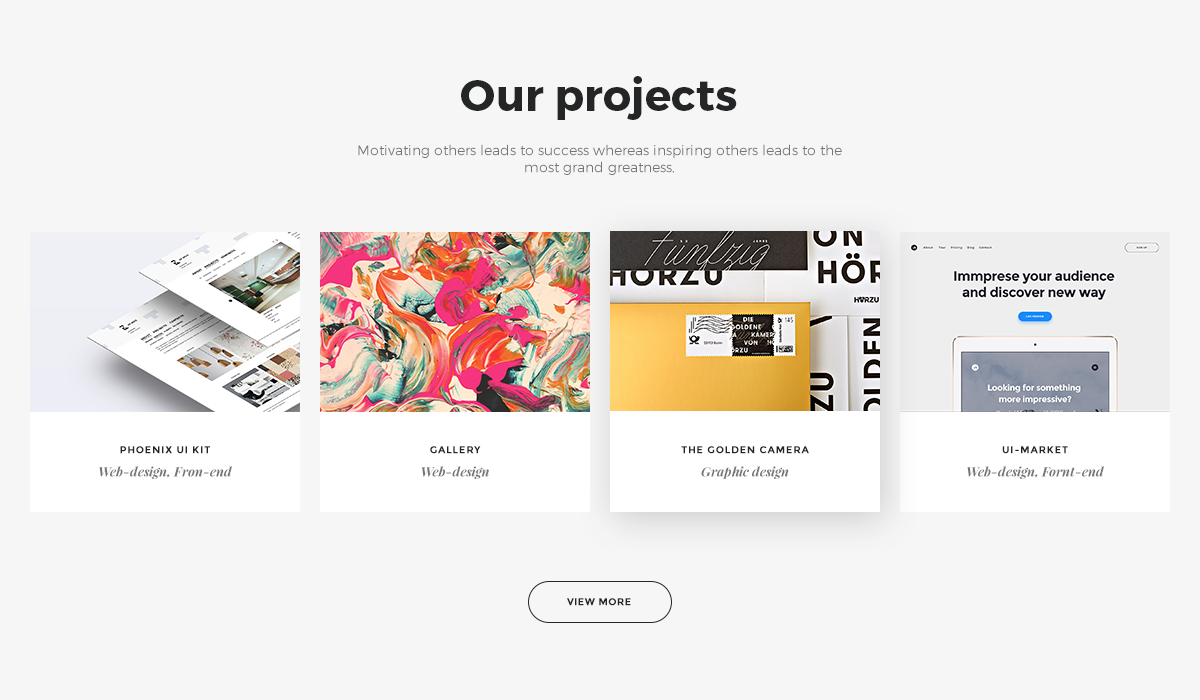
<style>
.page{position:relative;width:1200px;height:700px;background:#f6f6f6}
.page>*{position:absolute;margin:0}
.t1{font:44px "Montserrat-Bold";color:#242526}
.t2{font:14px "Montserrat-Light";color:#747474}
.t3{font:10px "Montserrat-Bold";letter-spacing:0.08em;color:#242526;text-transform:uppercase}
.t4{font:13px "PlayfairDisplay-BoldItalic";color:#747474}
.t5{font:10px "Montserrat-Bold";letter-spacing:0.04em;color:#242526;text-transform:uppercase}
</style>
<div class="page">
<p class="t1" style="left:461px;top:76px;width:276px;height:44px">Our projects</p>
<p class="t2" style="left:358px;top:144px;width:484px;height:31px;text-align:center">Motivating others leads to success whereas inspiring others leads to the most grand greatness.</p>
<p class="t3" style="left:120px;top:446px;width:90px;height:8px">Phoenix ui kit</p>
<p class="t3" style="left:430px;top:446px;width:51px;height:8px">Gallery</p>
<p class="t3" style="left:681px;top:446px;width:128px;height:8px">The Golden camera</p>
<p class="t3" style="left:1002px;top:446px;width:66px;height:8px">UI-market</p>
<p class="t4" style="left:99px;top:466px;width:133px;height:13px">Web-design, Fron-end</p>
<p class="t4" style="left:421px;top:466px;width:68px;height:13px">Web-design</p>
<p class="t4" style="left:701px;top:466px;width:88px;height:13px">Graphic design</p>
<p class="t4" style="left:967px;top:466px;width:137px;height:13px">Web-design, Fornt-end</p>
<p class="t5" style="left:567px;top:598px;width:64px;height:8px">view more</p>
</div>
